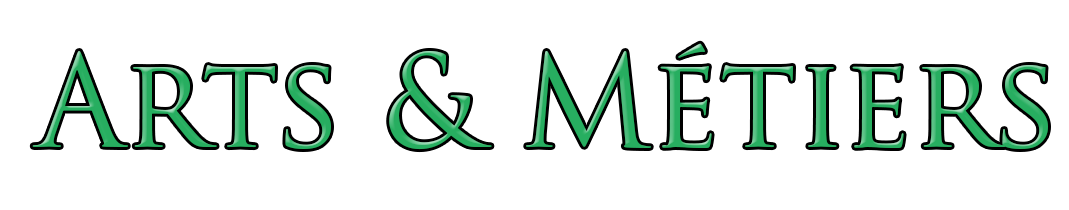
<style>
.page{position:relative;width:1069px;height:210px;background:#ffffff}
.page>*{position:absolute;margin:0}
.t1{font:125px "TrajanPro-Regular"}
</style>
<div class="page">
<p class="t1" style="left:32px;top:43px;width:1016px;height:107px">Arts &amp; Métiers</p>
</div>
